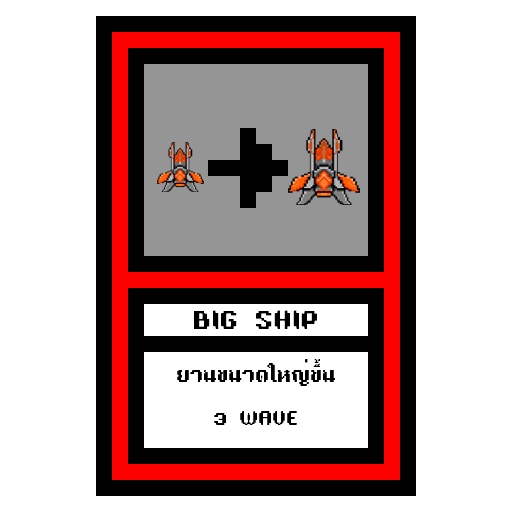
<style>
.page{position:relative;width:512px;height:512px;background:#ffffff}
.page>*{position:absolute;margin:0}
.t1{font:24px "TA16BIT-Regular";color:#000000}
.t2{font:18px "TA16BIT-Regular";color:#000000}
</style>
<div class="page">
<p class="t1" style="left:194px;top:310px;width:123px;height:19px">BIG SHIP</p>
<p class="t2" style="left:177px;top:359px;width:158px;height:66px;text-align:center">ยานขนาดใหญ่ขึ้น<br><br>3 WAVE</p>
</div>
